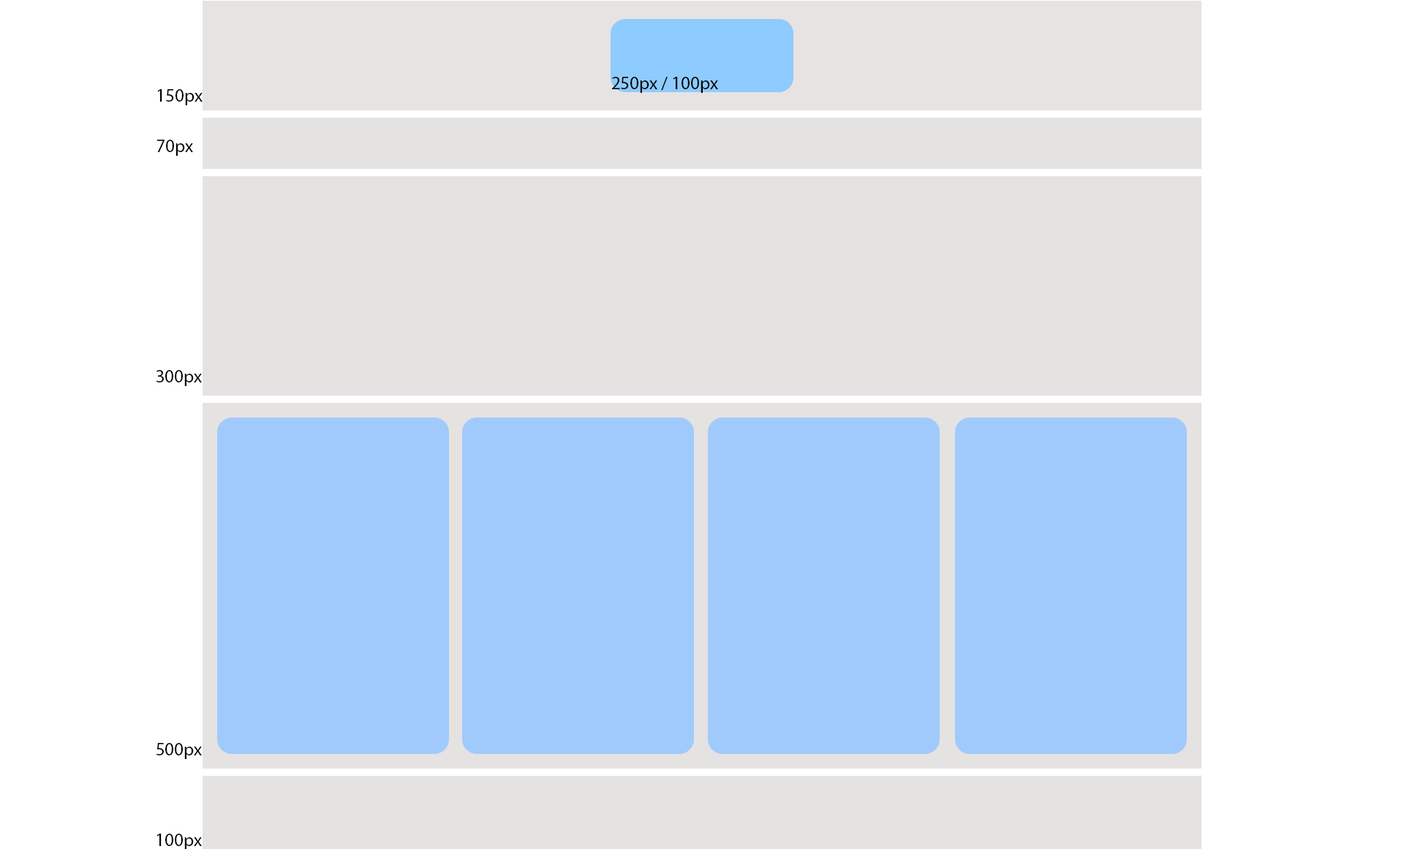
<style>
.page{position:relative;width:1404px;height:849px;background:#e5e2e2}
.page>*{position:absolute;margin:0}
.t1{font:18.3px "MyriadPro-Regular";color:#000000}
</style>
<div class="page">
<p class="t1" style="left:612px;top:77px;width:106px;height:16px">250px / 100px</p>
<p class="t1" style="left:157px;top:89px;width:46px;height:16px">150px</p>
<p class="t1" style="left:157px;top:140px;width:36px;height:16px">70px</p>
<p class="t1" style="left:157px;top:370px;width:45px;height:16px">300px</p>
<p class="t1" style="left:157px;top:743px;width:45px;height:16px">500px</p>
<p class="t1" style="left:157px;top:834px;width:45px;height:16px">100px</p>
</div>
